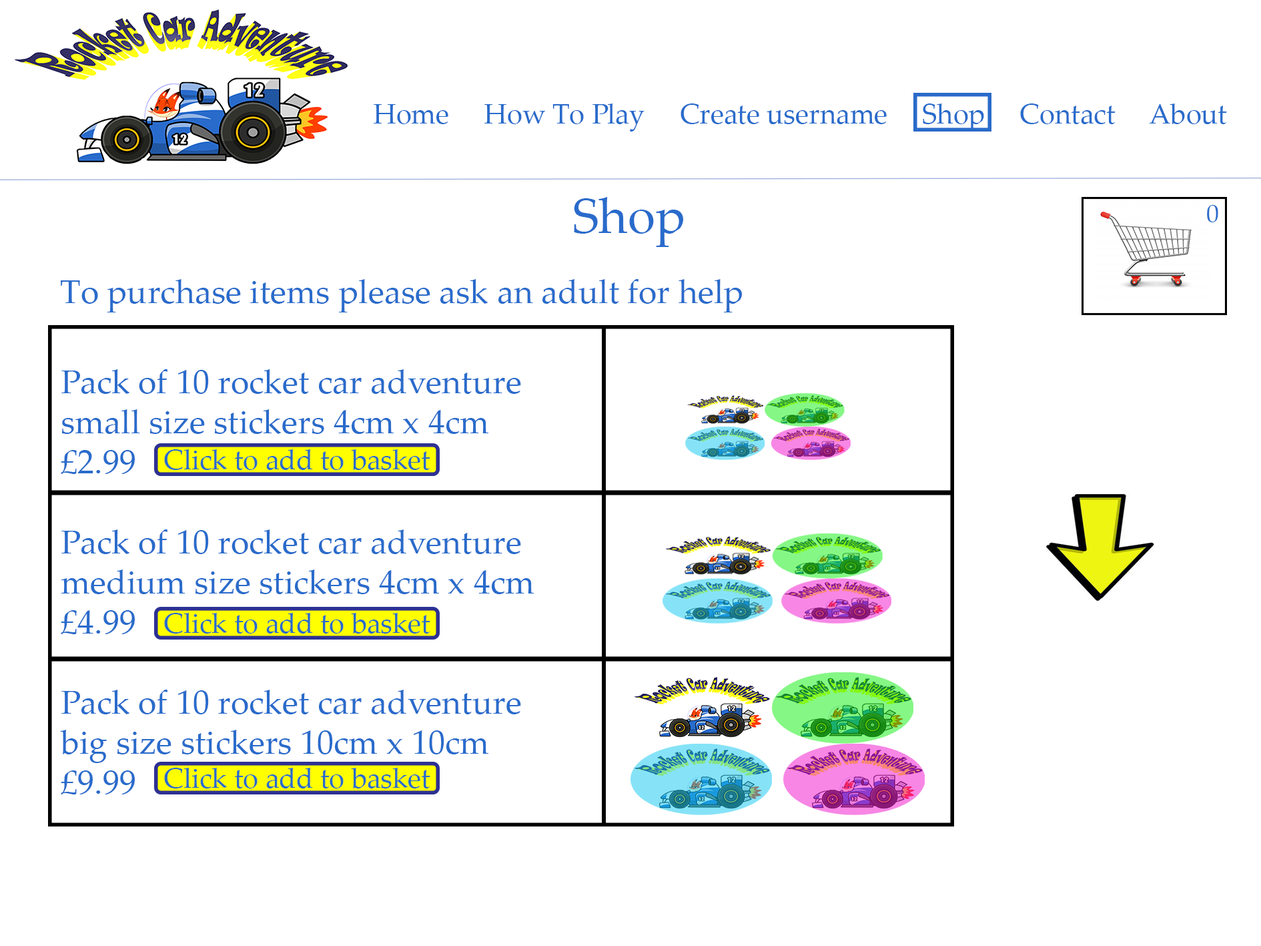
<style>
.page{position:relative;width:1261px;height:946px;background:#ffffff}
.page>*{position:absolute;margin:0}
.t1{font:27.8px "PalatinoLinotype-Roman";color:#296bcb}
.t2{font:50px "PalatinoLinotype-Roman";color:#296bcb}
.t3{font:25px "PalatinoLinotype-Roman";color:#296bcb}
.t4{font:33.4px "PalatinoLinotype-Roman";color:#296bcb}
.t5{font:8px "PalatinoLinotype-Roman";color:#296bcb}
</style>
<div class="page">
<p class="t1" style="left:374px;top:103px;width:853px;height:28px">Home     How To Play     Create username     Shop     Contact     About</p>
<p class="t2" style="left:574px;top:197px;width:109px;height:50px">Shop</p>
<p class="t3" style="left:1207px;top:205px;width:11px;height:17px">0</p>
<p class="t4" style="left:60px;top:279px;width:682px;height:33px">To purchase items please ask an adult for help</p>
<p class="t5" style="left:60px;top:369px;width:474px;height:425px">Pack of 10 rocket car adventure <br>small size stickers 4cm x 4cm<br>£2.99 <br><br>Pack of 10 rocket car adventure <br>medium size stickers 4cm x 4cm<br>£4.99<br><br>Pack of 10 rocket car adventure <br>big size stickers 10cm x 10cm<br>£9.99</p>
</div>
